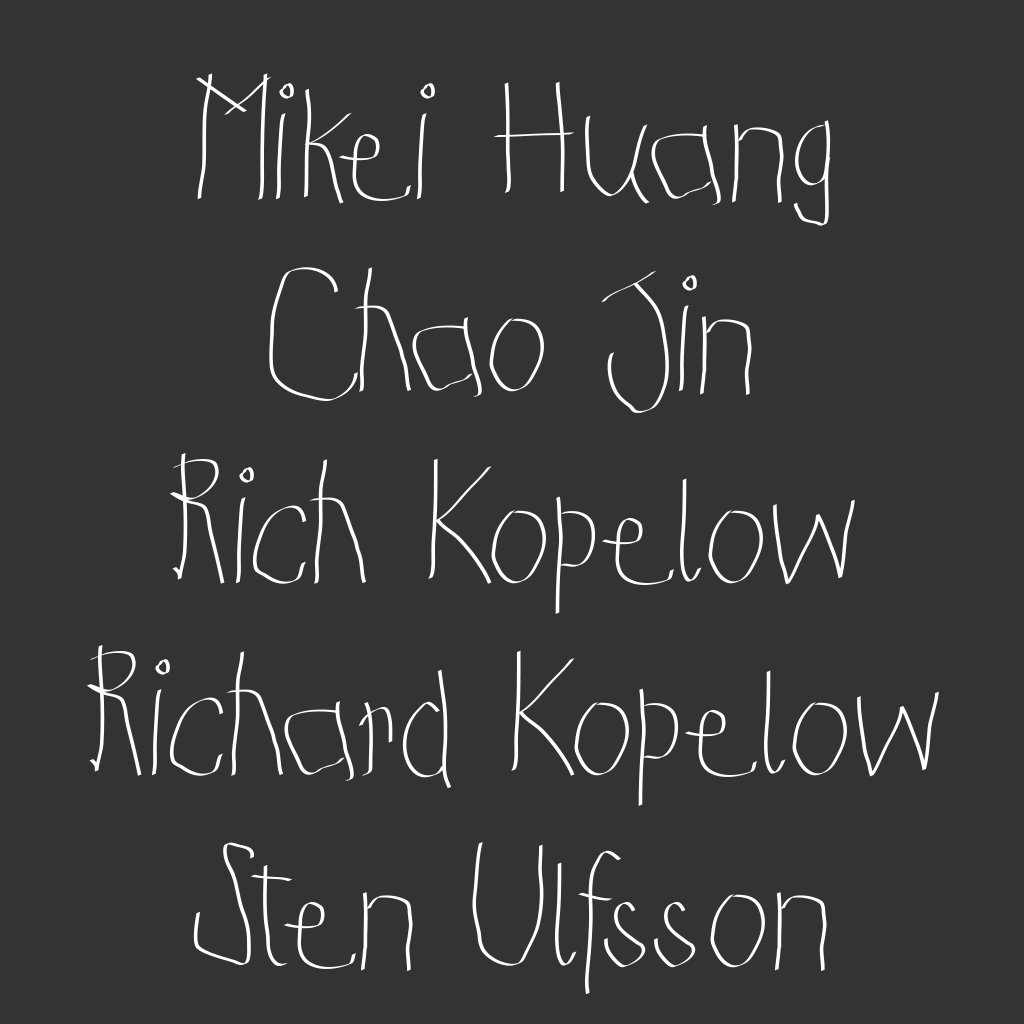
<style>
.page{position:relative;width:1024px;height:1024px;background:#333333}
.page>*{position:absolute;margin:0}
.t1{font:160px "KidsFirstPrintFont";color:#ffffff}
.t2{font:120px "Courier";color:#ffffff}
</style>
<div class="page">
<p class="t1" style="left:86px;top:73px;width:853px;height:922px;text-align:center">Mikei Huang<br>Chao Jin<br>Rich Kopelow<br>Richard Kopelow<br>Sten Ulfsson<br><span class="t2"></span></p>
</div>
